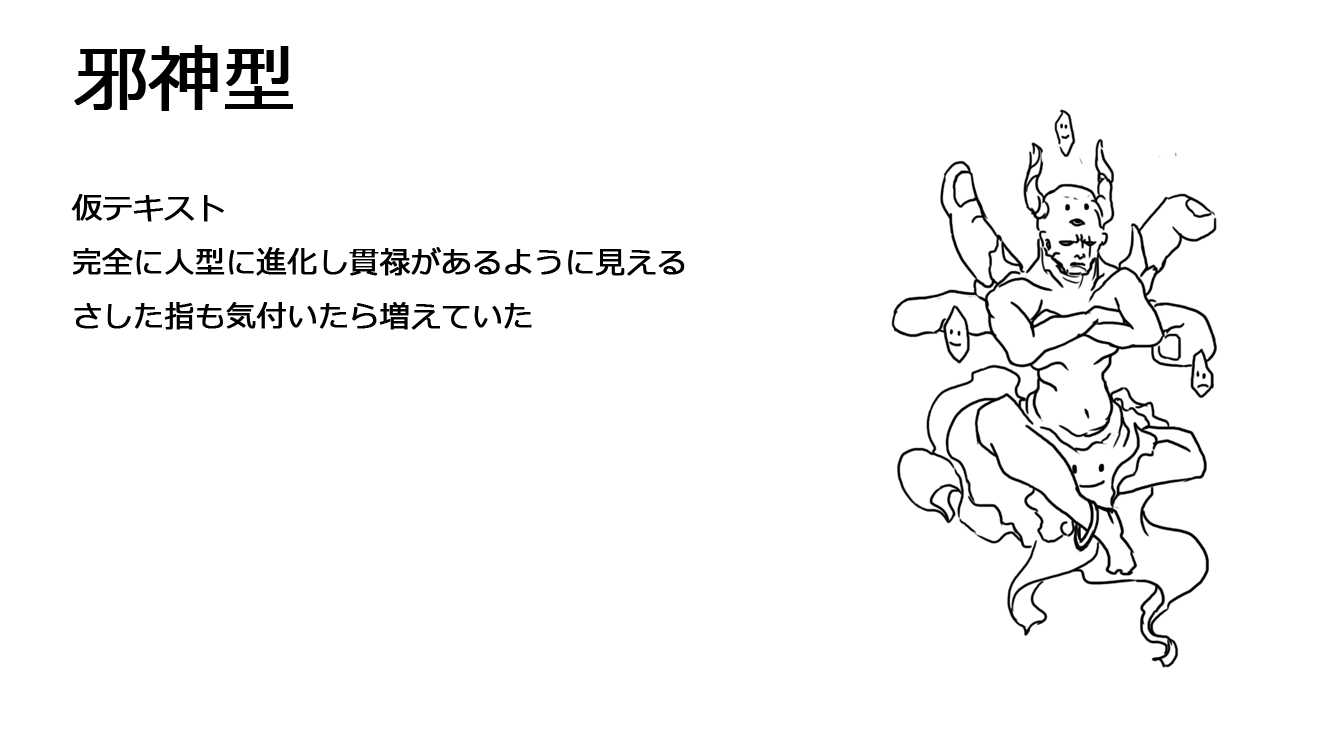
<style>
.page{position:relative;width:1334px;height:750px;background:#ffffff}
.page>*{position:absolute;margin:0}
.t1{font:72px "Meiryo";color:#000000;font-weight:bold}
.t2{font:30px "Meiryo";color:#000000;font-weight:bold}
</style>
<div class="page">
<p class="t1" style="left:74px;top:45px;width:219px;height:66px">邪神型</p>
<p class="t2" style="left:71px;top:194px;width:614px;height:136px">仮テキスト<br>完全に人型に進化し貫禄があるように見える<br>さした指も気付いたら増えていた</p>
</div>
